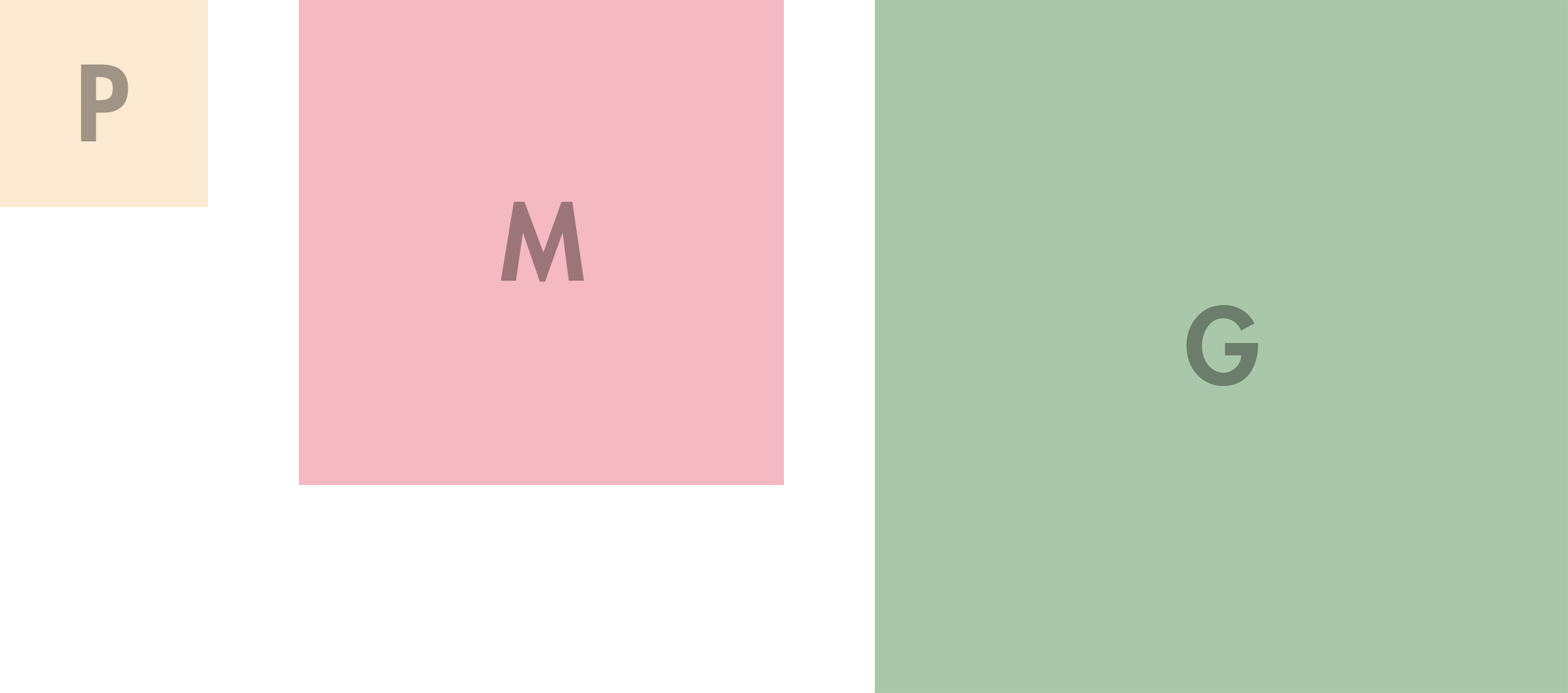
<style>
.page{position:relative;width:1568px;height:693px;background:#abc7ab}
.page>*{position:absolute;margin:0}
.t1{font:102px "FuturaLT-Heavy";color:#a09484}
.t2{font:102px "FuturaLT-Heavy";color:#9b757a}
.t3{font:102px "FuturaLT-Heavy";color:#6b7e6b}
</style>
<div class="page">
<p class="t1" style="left:80px;top:64px;width:48px;height:77px">P</p>
<p class="t2" style="left:500px;top:202px;width:84px;height:80px">M</p>
<p class="t3" style="left:1186px;top:305px;width:72px;height:81px">G</p>
</div>
